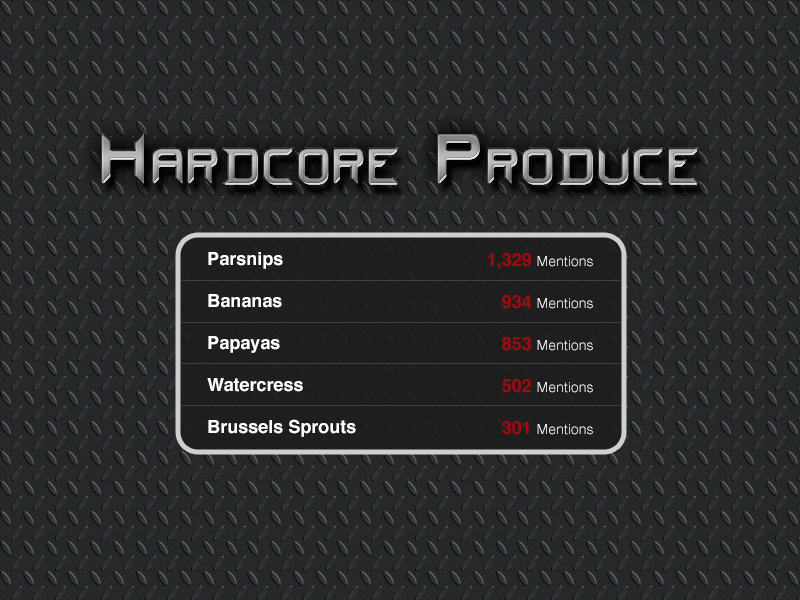
<style>
.page{position:relative;width:800px;height:600px}
.page>*{position:absolute;margin:0}
.t1{font:18px/21px "Helvetica-Bold";color:#ffffff}
.t2{font:14px/21px "Helvetica-Light";color:#ffffff}
.t3{font:18px/21px "Helvetica-Bold";color:#9e0b0f}
</style>
<div class="page">
<p class="t1" style="left:207px;top:252px;width:149px;height:185px">Parsnips<br><br>Bananas<br><br>Papayas<br><br>Watercress<br><br>Brussels Sprouts</p>
<p class="t2" style="left:488px;top:253px;width:105px;height:182px;text-align:right"><span class="t3">1,329 </span>Mentions<br><br><span class="t3">934 </span>Mentions<br><br><span class="t3">853 </span>Mentions<br><br><span class="t3">502 </span>Mentions<br><br><span class="t3">301 </span>Mentions</p>
</div>
